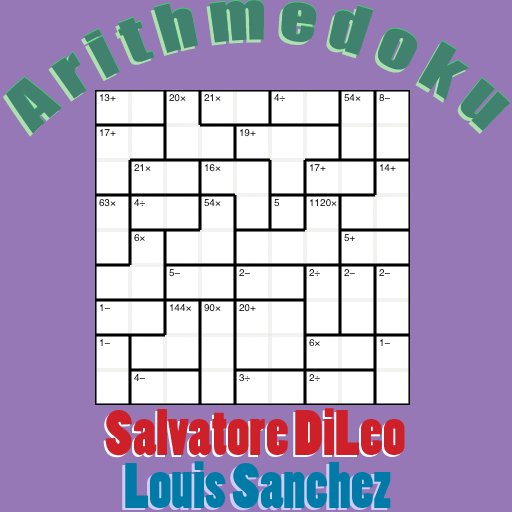
<style>
.page{position:relative;width:512px;height:512px;background:#9678b6}
.page>*{position:absolute;margin:0}
.t1{font:60px "Impact";color:#40826d}
.t2{font:60px "PoplarStd";color:#ce2029}
.t3{font:60px "PoplarStd";color:#007ba7}
.t4{font:60px "PoplarStd"}
</style>
<div class="page">
<p class="t1" style="left:3px;top:3px;width:504px;height:134px">A r i t h m e d o k u</p>
<p class="t1" style="left:6px;top:0px;width:504px;height:133px">A r i t h m e d o k u</p>
<p class="t1" style="left:6px;top:0px;width:504px;height:134px">A r i t h m e d o k u</p>
<p class="t2" style="left:103px;top:410px;width:300px;height:48px">Salvatore DiLeo</p>
<p class="t2" style="left:105px;top:408px;width:300px;height:48px">Salvatore DiLeo</p>
<p class="t3" style="left:125px;top:461px;width:266px;height:48px">Louis Sanchez</p>
<p class="t4" style="left:122px;top:463px;width:266px;height:48px">Louis Sanchez</p>
</div>
